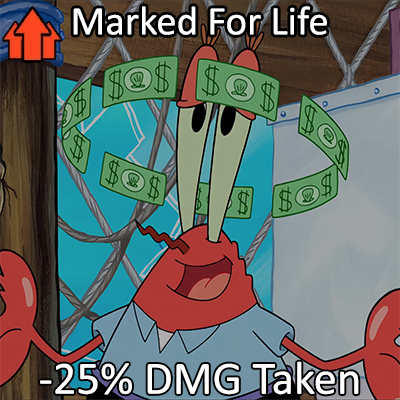
<style>
.page{position:relative;width:400px;height:400px}
.page>*{position:absolute;margin:0}
.t1{font:70px "Calibri";color:#ffffff}
.t2{font:80px "Calibri";color:#ffffff}
</style>
<div class="page">
<p class="t1" style="left:73px;top:6px;width:254px;height:29px">Marked For Life</p>
<p class="t2" style="left:40px;top:361px;width:319px;height:34px">-25% DMG Taken</p>
</div>
